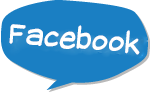
<style>
.page{position:relative;width:150px;height:92px;background:#1a7fc3}
.page>*{position:absolute;margin:0}
.t1{font:30.3px "SuplexmentaryComicNC";color:#ffffff}
</style>
<div class="page">
<p class="t1" style="left:9px;top:24px;width:131px;height:31px;rotate:5deg">Facebook</p>
</div>
